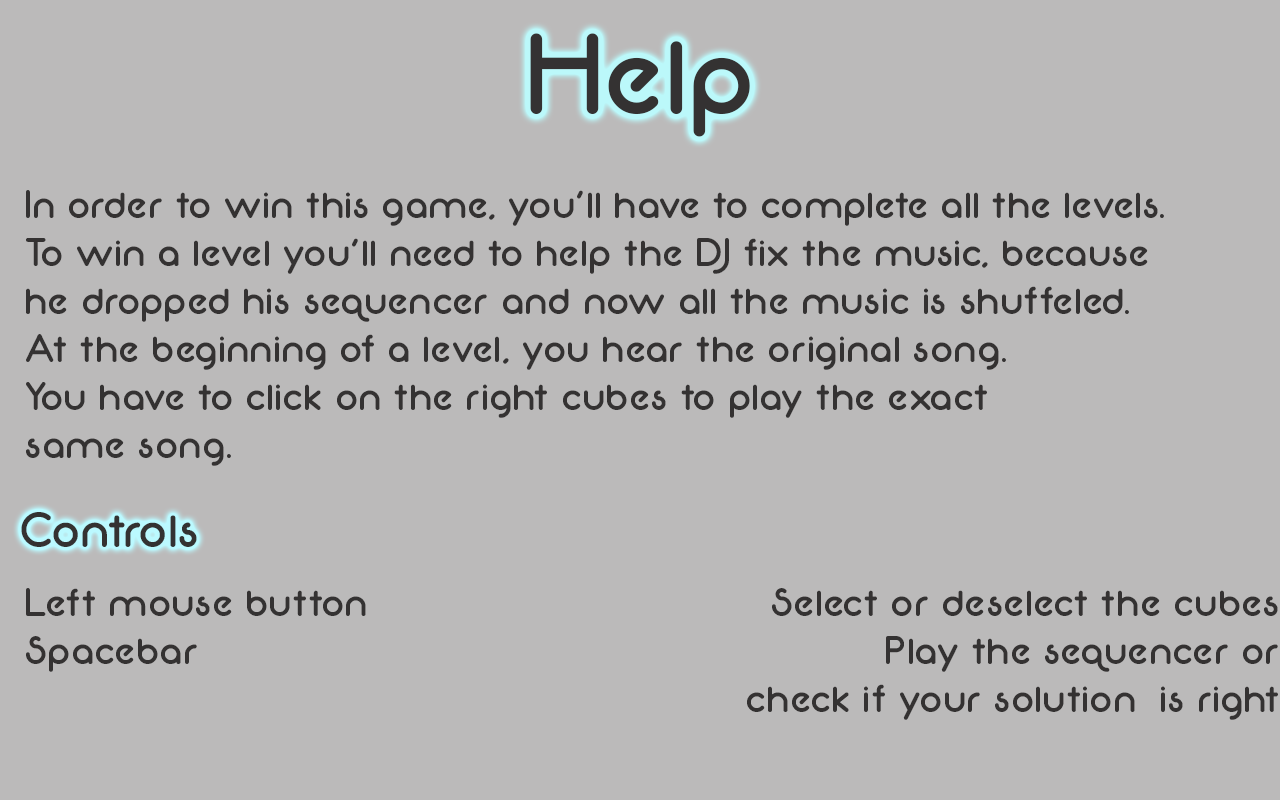
<style>
.page{position:relative;width:1280px;height:800px;background:#bbbaba}
.page>*{position:absolute;margin:0}
.t1{font:115px "Neon80s";color:#343232}
.t2{font:40px "Neon80s";color:#343232}
.t3{font:50px "Neon80s";color:#343232}
</style>
<div class="page">
<p class="t1" style="left:530px;top:33px;width:220px;height:104px">Help</p>
<p class="t2" style="left:26px;top:190px;width:1138px;height:276px">In order to win this game, you’ll have to complete all the levels.<br>To win a level you’ll need to help the DJ fix the music, because he dropped his sequencer and now all the music is shuffeled. <br>At the beginning of a level, you hear the original song. <br>You have to click on the right cubes to play the exact <br>same song.</p>
<p class="t3" style="left:21px;top:512px;width:176px;height:35px">Controls</p>
<p class="t2" style="left:26px;top:588px;width:1252px;height:132px"><span class="t3"><br></span>Left mouse button       Select or deselect the cubes<br>Spacebar     Play the sequencer or  <br>check if your solution  is right</p>
</div>
